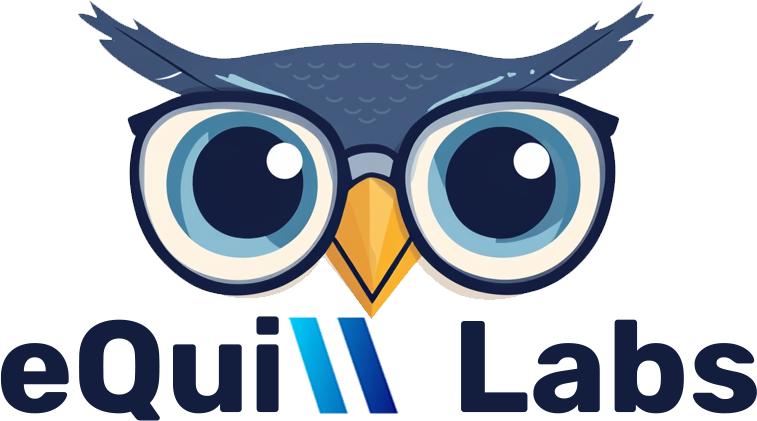
<style>
.page{position:relative;width:757px;height:421px;background:#ffffff}
.page>*{position:absolute;margin:0}
.t1{font:130px "Rubik-Bold";color:#131d3e}
</style>
<div class="page">
<p class="t1" style="left:0px;top:316px;width:757px;height:105px">eQui      Labs</p>
</div>
